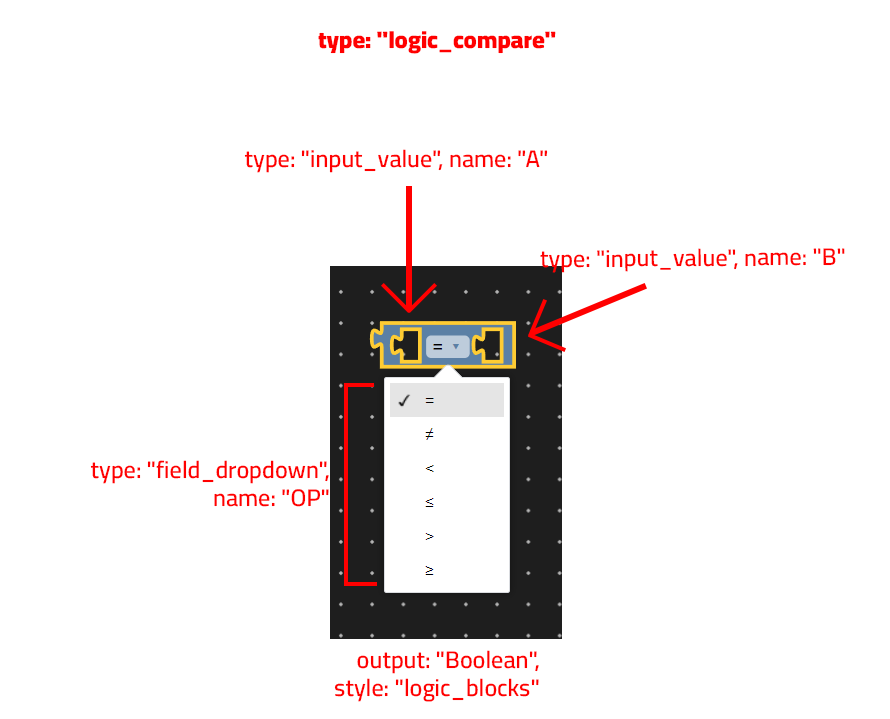
<style>
.page{position:relative;width:890px;height:719px;background:#ffffff}
.page>*{position:absolute;margin:0}
.t1{font:24px "Cairo-Black";color:#ff0000}
.t2{font:24px "Cairo-SemiBold";color:#ff0000}
</style>
<div class="page">
<p class="t1" style="left:318px;top:31px;width:238px;height:23px">type: "logic_compare"</p>
<p class="t2" style="left:244px;top:149px;width:304px;height:24px">type: "input_value", name: "A"</p>
<p class="t2" style="left:540px;top:248px;width:305px;height:25px">type: "input_value", name: "B"</p>
<p class="t2" style="left:90px;top:460px;width:239px;height:47px;text-align:right">type: "field_dropdown",<br>                    name: "OP"</p>
<p class="t2" style="left:334px;top:650px;width:205px;height:52px;text-align:right">output: "Boolean",<br>            style: "logic_blocks"</p>
</div>
